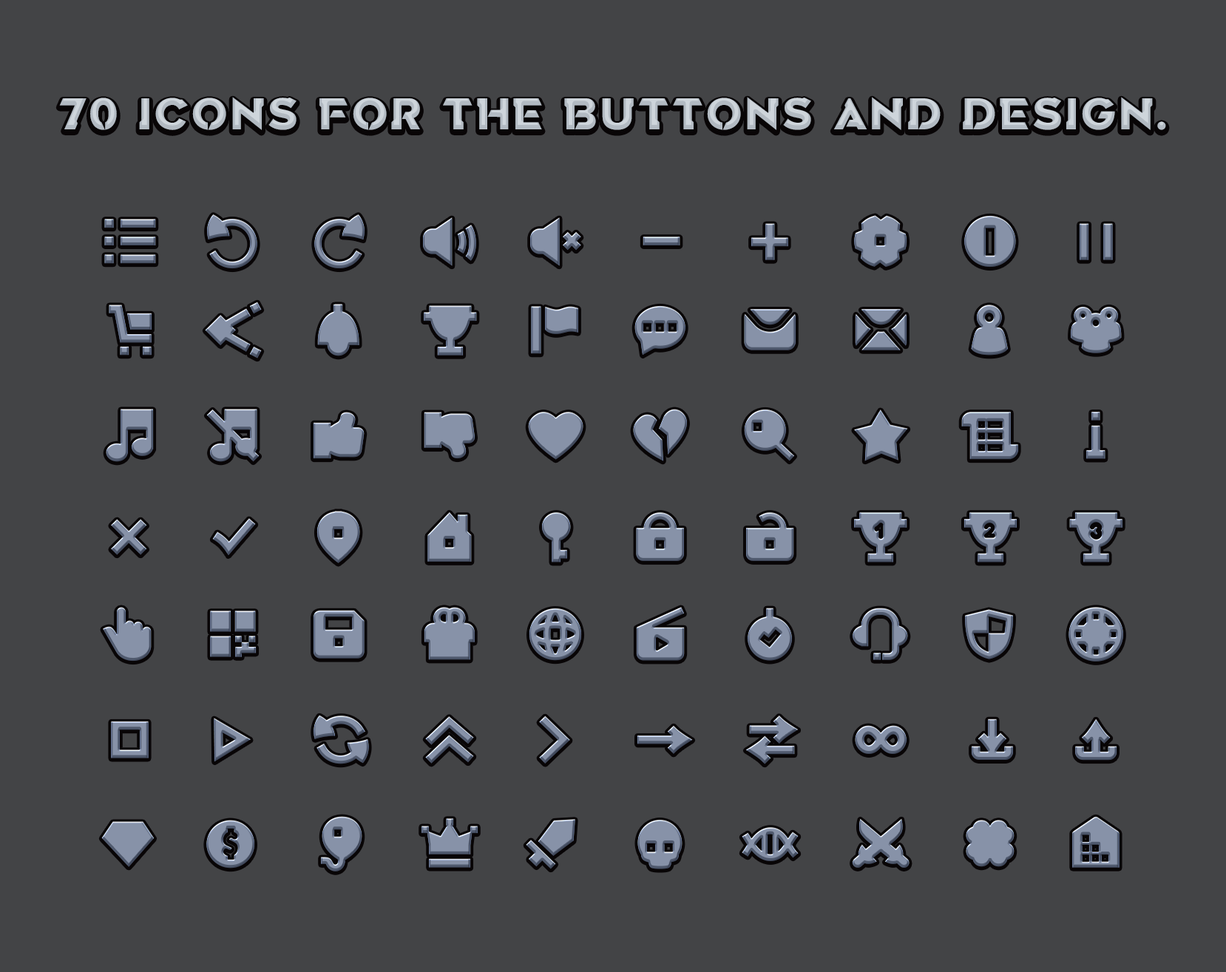
<style>
.page{position:relative;width:1226px;height:972px;background:#434446}
.page>*{position:absolute;margin:0}
.t1{font:44.4px "Dirga-Extra-Bold";text-transform:uppercase}
</style>
<div class="page">
<p class="t1" style="left:59px;top:97px;width:1107px;height:33px">70 icons for the buttons and design.</p>
</div>
